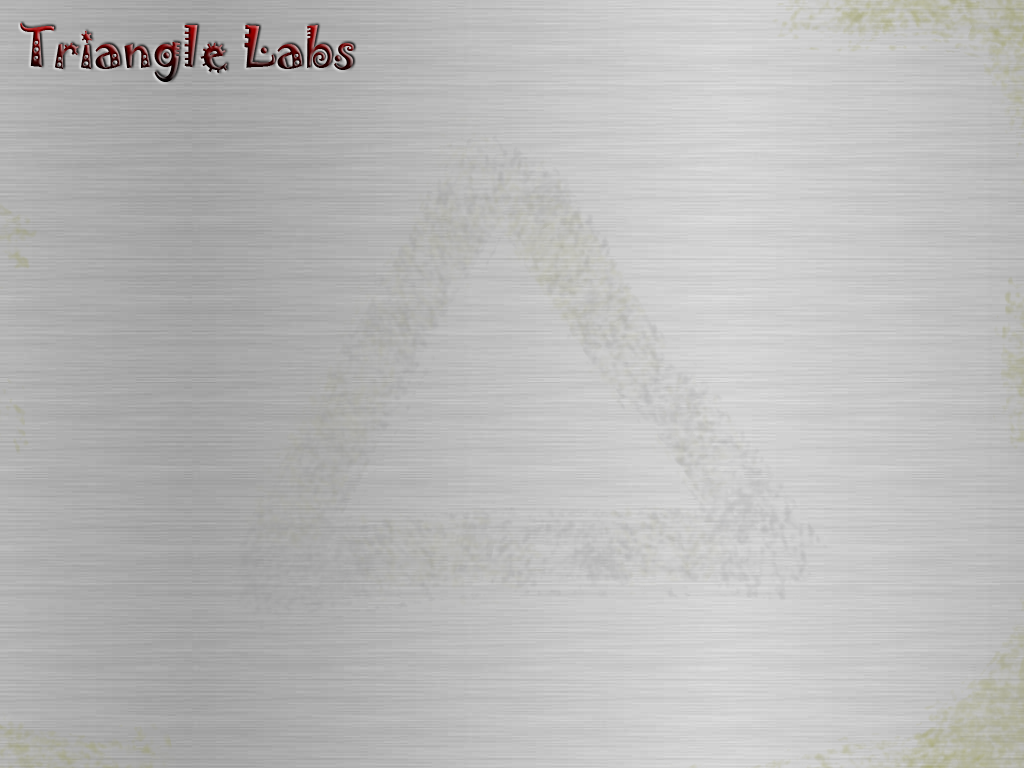
<style>
.page{position:relative;width:1024px;height:768px}
.page>*{position:absolute;margin:0}
.t1{font:50px "Jokerman-Regular"}
</style>
<div class="page">
<p class="t1" style="left:20px;top:23px;width:334px;height:59px">Triangle Labs</p>
</div>
